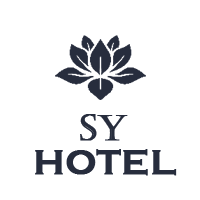
<style>
.page{position:relative;width:200px;height:200px;background:#ffffff}
.page>*{position:absolute;margin:0}
.t1{font:36px "Castellar";color:#272d3d;font-weight:bold}
.t2{font:36px "CopperplateGothic-Bold";color:#272d3d;text-transform:uppercase;font-weight:bold}
</style>
<div class="page">
<p class="t1" style="left:80px;top:114px;width:48px;height:27px">SY</p>
<p class="t2" style="left:35px;top:149px;width:142px;height:27px">HOtel</p>
</div>
